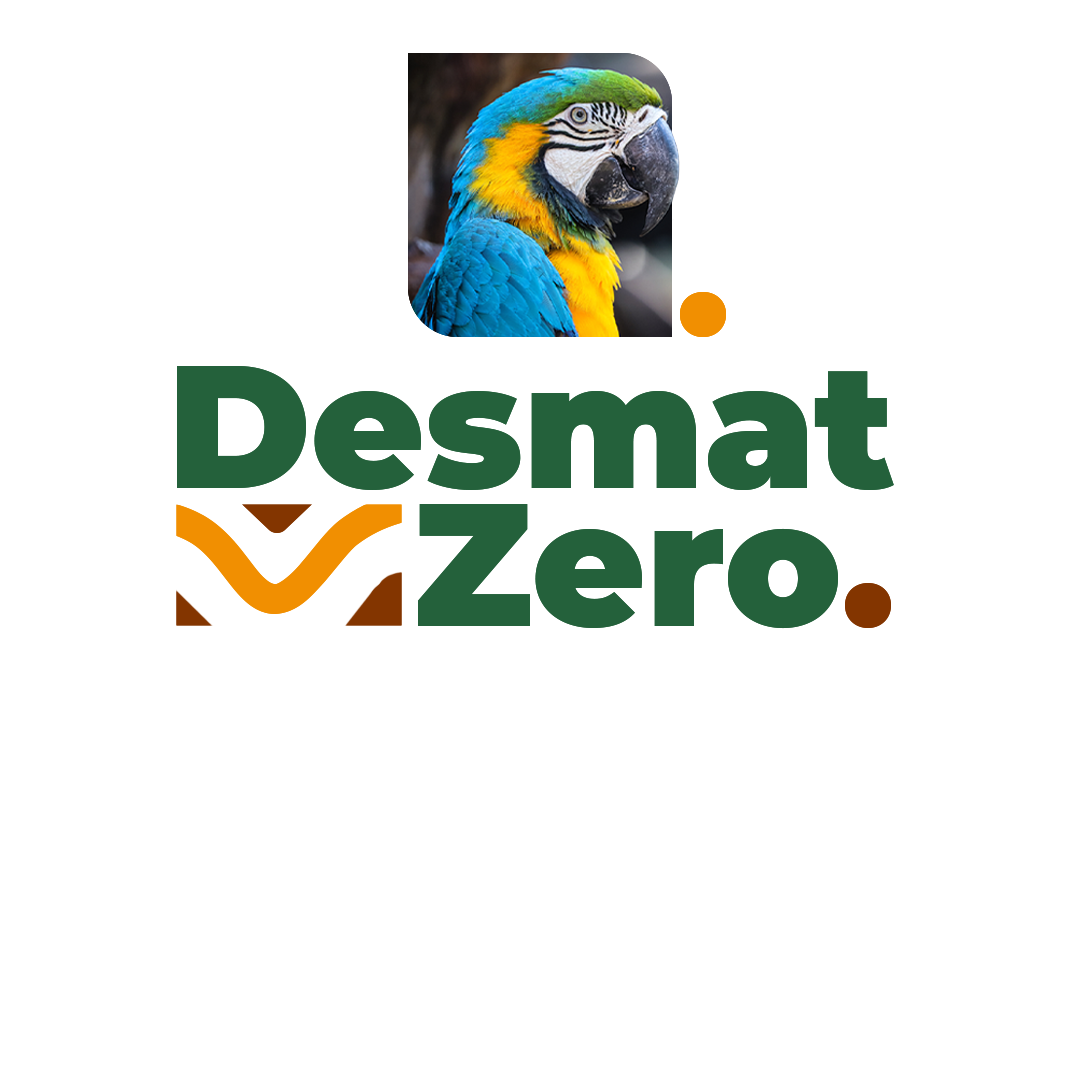
<style>
.page{position:relative;width:1080px;height:1080px;background:#ffffff}
.page>*{position:absolute;margin:0}
.t1{font:174.1px/138px "Montserrat-Black";color:#24613b}
</style>
<div class="page">
<p class="t1" style="left:177px;top:366px;width:717px;height:263px;text-align:right">Desmat<br>Zero.</p>
</div>
